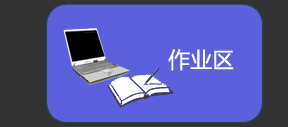
<style>
.page{position:relative;width:288px;height:127px;background:#5b61dc}
.page>*{position:absolute;margin:0}
.t1{font:22px "MicrosoftYaHei";color:#ffffff}
</style>
<div class="page">
<p class="t1" style="left:168px;top:49px;width:66px;height:22px">作业区</p>
</div>
